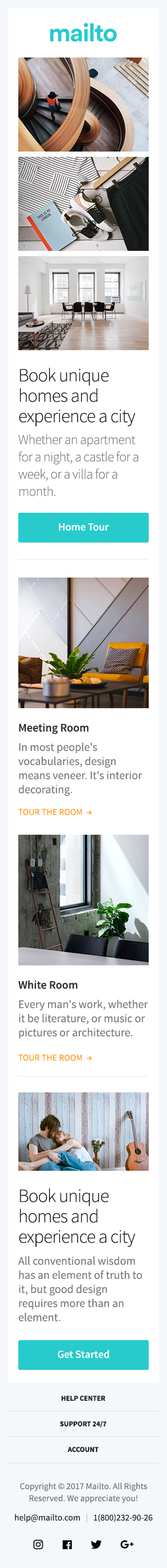
<style>
.page{position:relative;width:167px;height:1568px;background:#ffffff}
.page>*{position:absolute;margin:0}
.t1{font:18.8px/20.4px "SourceSansPro-Light";letter-spacing:-0.03em;color:#1a1a1a}
.t2{font:13.6px/17.2px "SourceSansPro-Light";letter-spacing:-0.027em;color:#7b7b7b}
.t3{font:11px "SourceSansPro-Semibold";letter-spacing:-0.01em;color:#ffffff}
.t4{font:11.5px "SourceSansPro-Semibold";color:#303030}
.t5{font:11.5px/14.1px "SourceSansPro-Regular";color:#7b7b7b}
.t6{font:8.9px "SourceSansPro-Regular";letter-spacing:0.012em;color:#ff9800}
.t7{font:7.3px/25.6px "SourceSansPro-Bold";color:#1a1a1a}
.t8{font:8.9px/12px "SourceSansPro-Regular";color:#727374}
.t9{font:8.9px/12px "SourceSansPro-Regular";color:#1a1a1a}
.t10{font:8.9px/12px "SourceSansPro-Regular";color:#bebebe}
</style>
<div class="page">
<p class="t1" style="left:19px;top:367px;width:117px;height:59px">Book unique homes and experience a city</p>
<p class="t2" style="left:18px;top:434px;width:121px;height:62px">Whether an apartment for a night, a castle for a week, or a villa for a month.</p>
<p class="t3" style="left:59px;top:523px;width:50px;height:8px">Home Tour</p>
<p class="t4" style="left:19px;top:723px;width:70px;height:11px">Meeting Room</p>
<p class="t5" style="left:18px;top:742px;width:125px;height:54px">In most people's <br>vocabularies, design <br>means veneer. It's interior <br>decorating.</p>
<p class="t6" style="left:18px;top:809px;width:74px;height:6px">TOUR THE ROOM  →</p>
<p class="t4" style="left:18px;top:980px;width:60px;height:9px">White Room</p>
<p class="t5" style="left:19px;top:999px;width:129px;height:40px">Every man's work, whether it be literature, or music or pictures or architecture.</p>
<p class="t6" style="left:18px;top:1054px;width:74px;height:7px">TOUR THE ROOM  →</p>
<p class="t1" style="left:19px;top:1188px;width:117px;height:59px">Book unique homes and experience a city</p>
<p class="t5" style="left:18px;top:1256px;width:124px;height:65px">All conventional wisdom has an element of truth to it, but good design <br>requires more than an <br>element.</p>
<p class="t3" style="left:57px;top:1350px;width:52px;height:8px">Get Started</p>
<p class="t7" style="left:60px;top:1396px;width:47px;height:56px;text-align:center">HELP CENTER<br>SUPPORT 24/7<br>ACCOUNT</p>
<p class="t8" style="left:15px;top:1482px;width:138px;height:41px;text-align:center">Copyright © 2017 Mailto. All Rights Reserved. We appreciate you!<br><span class="t9">help@mailto.com   </span><span class="t10">|   </span><span class="t9">1(800)232-90-26</span></p>
</div>
